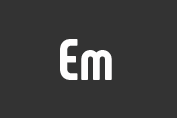
<style>
.page{position:relative;width:177px;height:118px;background:#333333}
.page>*{position:absolute;margin:0}
.t1{font:58.3px "Phenomena-ExtraBold";color:#fffefe}
</style>
<div class="page">
<p class="t1" style="left:60px;top:39px;width:52px;height:41px">Em</p>
</div>
